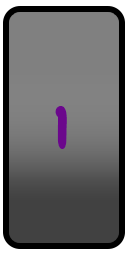
<style>
.page{position:relative;width:128px;height:256px;background:#808080}
.page>*{position:absolute;margin:0}
.t1{font:60px "Chewy-Regular";color:#6b078c}
</style>
<div class="page">
<p class="t1" style="left:55px;top:106px;width:12px;height:43px">1</p>
</div>
